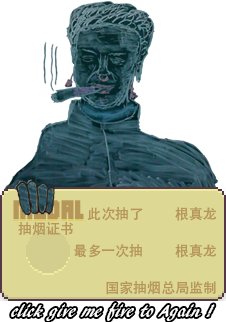
<style>
.page{position:relative;width:226px;height:322px;background:#ffffff}
.page>*{position:absolute;margin:0}
.t1{font:14px "AdobeHeitiStd-Regular";color:#b6975b}
</style>
<div class="page">
<p class="t1" style="left:87px;top:207px;width:130px;height:14px">此次抽了          根真龙</p>
<p class="t1" style="left:18px;top:222px;width:55px;height:14px">抽烟证书</p>
<p class="t1" style="left:74px;top:244px;width:143px;height:14px">最多一次抽          根真龙</p>
<p class="t1" style="left:106px;top:281px;width:110px;height:14px">国家抽烟总局监制</p>
</div>
